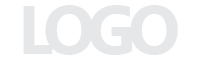
<style>
.page{position:relative;width:200px;height:60px;background:#ffffff}
.page>*{position:absolute;margin:0}
.t1{font:68.6px "SegoeUI-Bold";letter-spacing:-0.12em;color:#e6e7e8}
</style>
<div class="page">
<p class="t1" style="left:23px;top:5px;width:155px;height:50px">LOGO</p>
</div>
